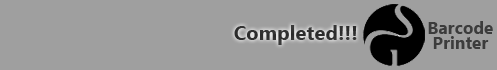
<style>
.page{position:relative;width:497px;height:70px;background:#9f9f9f}
.page>*{position:absolute;margin:0}
.t1{font:20.3px "Ebrima-Bold";color:#2f2f2f}
.t2{font:17.2px/14.8px "Ebrima-Bold";color:#3c3c3c}
</style>
<div class="page">
<p class="t1" style="left:234px;top:25px;width:123px;height:20px">Completed!!!</p>
<p class="t2" style="left:428px;top:21px;width:65px;height:28px;text-align:center">Barcode<br>Printer</p>
</div>
